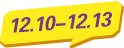
<style>
.page{position:relative;width:124px;height:48px;background:#ffec1d}
.page>*{position:absolute;margin:0}
.t1{font:20.8px "FZZYJW--GB1-0";letter-spacing:-0.043em;color:#733a7e;font-style:italic;scale:0.97 1}
</style>
<div class="page">
<p class="t1" style="left:11px;top:11px;width:102px;height:22px;rotate:-4deg">12.10-12.13</p>
</div>
